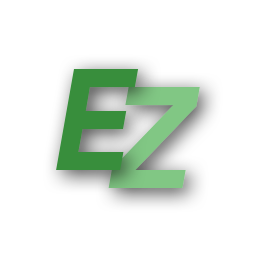
<style>
.page{position:relative;width:256px;height:256px;background:#ffffff}
.page>*{position:absolute;margin:0}
.t1{font:141.2px "ProductSans-BoldItalic";letter-spacing:-0.22em;color:#388e3c}
.t2{font:141.2px "ProductSans-BoldItalic";letter-spacing:-0.22em;color:#81c784}
</style>
<div class="page">
<p class="t1" style="left:56px;top:69px;width:83px;height:101px">E</p>
<p class="t2" style="left:108px;top:87px;width:92px;height:101px">Z</p>
</div>
